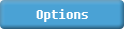
<style>
.page{position:relative;width:124px;height:29px;background:#4aa2d5}
.page>*{position:absolute;margin:0}
.t1{font:12px "Fixedsys";color:#feffff}
</style>
<div class="page">
<p class="t1" style="left:36px;top:9px;width:52px;height:13px">Options</p>
</div>
